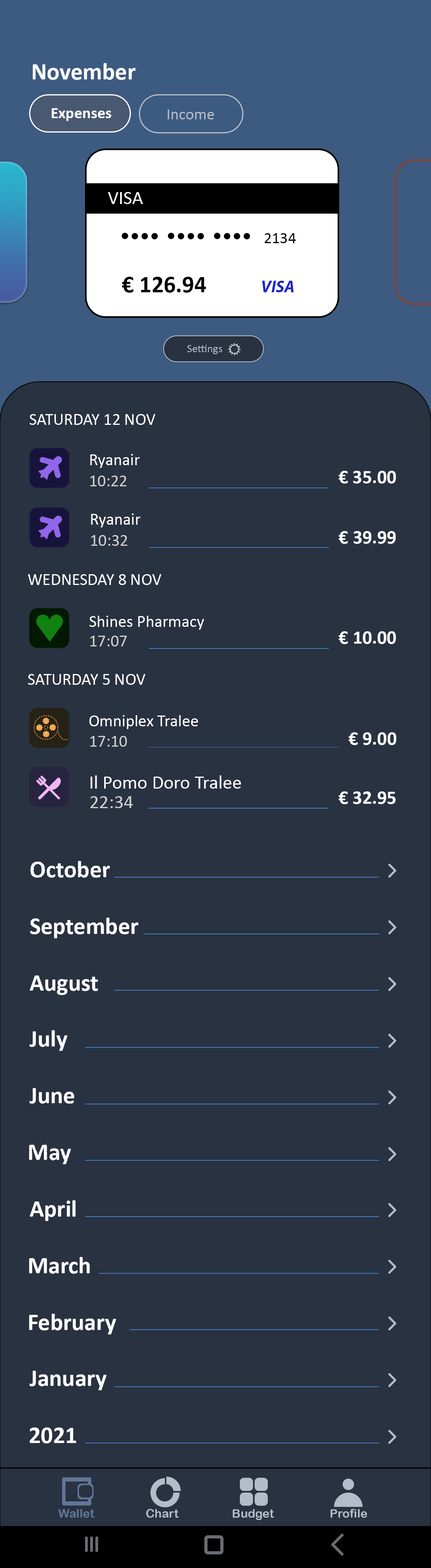
<style>
.page{position:relative;width:431px;height:1568px;background:#293241}
.page>*{position:absolute;margin:0}
.t1{font:24px "Calibri-Bold";color:#ffffff}
.t2{font:16px "Calibri-Bold";color:#ffffff}
.t3{font:16px "Calibri";color:#b4bcc9}
.t4{font:19.2px "Calibri";color:#ffffff}
.t5{font:16px "Calibri";color:#000000}
.t6{font:24px "Calibri-Bold";color:#000000}
.t7{font:16.8px "MyriadPro-BoldIt";color:#1f27c6}
.t8{font:11.2px "Calibri";color:#b4bcc9}
.t9{font:16.8px "Calibri";color:#ffffff}
.t10{font:19.2px "Calibri-Bold";color:#ffffff}
.t11{font:16.8px "Calibri";color:#cfcfcf}
.t12{font:19.2px "Calibri";color:#cfcfcf}
.t13{font:12px "ArialRoundedMTBold";color:#617698}
.t14{font:12px "ArialRoundedMTBold";color:#b4bcc9}
</style>
<div class="page">
<p class="t1" style="left:33px;top:63px;width:103px;height:17px">November</p>
<p class="t2" style="left:52px;top:108px;width:59px;height:13px">Expenses</p>
<p class="t3" style="left:168px;top:109px;width:46px;height:10px">Income</p>
<p class="t4" style="left:108px;top:192px;width:35px;height:12px">VISA</p>
<p class="t5" style="left:265px;top:233px;width:31px;height:10px">2134</p>
<p class="t6" style="left:122px;top:277px;width:84px;height:16px">€ 126.94</p>
<p class="t7" style="left:262px;top:281px;width:32px;height:11px">VISA</p>
<p class="t8" style="left:187px;top:345px;width:35px;height:9px">Settings</p>
<p class="t9" style="left:30px;top:414px;width:126px;height:11px">SATURDAY 12 NOV</p>
<p class="t9" style="left:90px;top:454px;width:50px;height:14px">Ryanair</p>
<p class="t10" style="left:339px;top:471px;width:57px;height:13px">€ 35.00</p>
<p class="t11" style="left:90px;top:476px;width:37px;height:10px">10:22</p>
<p class="t9" style="left:91px;top:513px;width:50px;height:14px">Ryanair</p>
<p class="t10" style="left:339px;top:531px;width:57px;height:13px">€ 39.99</p>
<p class="t11" style="left:91px;top:535px;width:36px;height:11px">10:32</p>
<p class="t9" style="left:28px;top:574px;width:134px;height:11px">WEDNESDAY 8 NOV</p>
<p class="t9" style="left:89px;top:616px;width:115px;height:14px">Shines Pharmacy</p>
<p class="t11" style="left:90px;top:636px;width:37px;height:10px">17:07</p>
<p class="t10" style="left:339px;top:631px;width:57px;height:13px">€ 10.00</p>
<p class="t9" style="left:28px;top:674px;width:118px;height:11px">SATURDAY 5 NOV</p>
<p class="t9" style="left:89px;top:715px;width:109px;height:14px">Omniplex Tralee</p>
<p class="t11" style="left:90px;top:736px;width:37px;height:11px">17:10</p>
<p class="t10" style="left:349px;top:732px;width:47px;height:13px">€ 9.00</p>
<p class="t4" style="left:91px;top:775px;width:150px;height:14px">Il Pomo Doro Tralee</p>
<p class="t12" style="left:90px;top:796px;width:43px;height:12px">22:34</p>
<p class="t10" style="left:339px;top:791px;width:57px;height:13px">€ 32.95</p>
<p class="t1" style="left:30px;top:861px;width:80px;height:17px">October</p>
<p class="t1" style="left:30px;top:918px;width:109px;height:20px">September</p>
<p class="t1" style="left:30px;top:975px;width:68px;height:20px">August</p>
<p class="t1" style="left:30px;top:1030px;width:37px;height:21px">July</p>
<p class="t1" style="left:30px;top:1088px;width:44px;height:16px">June</p>
<p class="t1" style="left:29px;top:1145px;width:42px;height:19px">May</p>
<p class="t1" style="left:30px;top:1200px;width:46px;height:21px">April</p>
<p class="t1" style="left:29px;top:1257px;width:61px;height:17px">March</p>
<p class="t1" style="left:29px;top:1314px;width:87px;height:20px">February</p>
<p class="t1" style="left:30px;top:1371px;width:77px;height:19px">January</p>
<p class="t1" style="left:30px;top:1427px;width:46px;height:16px">2021</p>
<p class="t13" style="left:58px;top:1509px;width:37px;height:9px">Wallet</p>
<p class="t14" style="left:146px;top:1509px;width:33px;height:9px">Chart</p>
<p class="t14" style="left:233px;top:1509px;width:41px;height:11px">Budget</p>
<p class="t14" style="left:331px;top:1509px;width:36px;height:9px">Profile</p>
</div>
